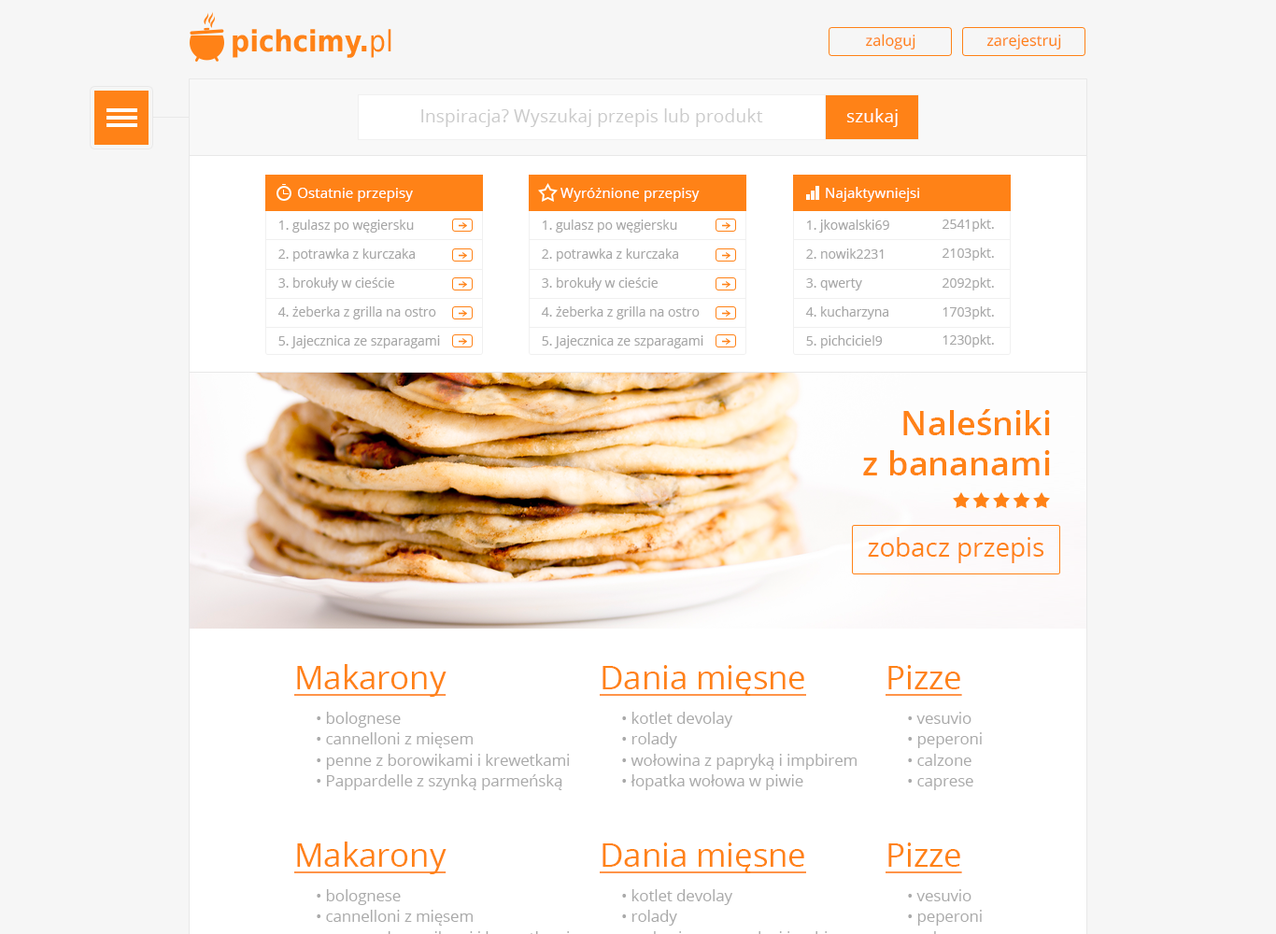
<style>
.page{position:relative;width:1276px;height:934px;background:#f6f6f6}
.page>*{position:absolute;margin:0}
.t1{font:29.2px "DejaVuSansCondensed-Bold";color:#ff8217}
.t2{font:29.2px "DejaVuSansCondensed";color:#ff8217}
.t3{font:15.1px "OpenSans";color:#ff8217}
.t4{font:18.2px "OpenSans";color:#cbcbcb}
.t5{font:18.2px "OpenSans";color:#ffffff}
.t6{font:14.3px "OpenSans";color:#ffffff}
.t7{font:13px "OpenSans";color:#a7a7a7}
.t8{font:33.7px "OpenSans-Semibold";color:#ff8217}
.t9{font:26px "OpenSans";color:#ff8217}
.t10{font:32.4px "OpenSans";color:#ff8217;text-decoration:underline}
.t11{font:15.6px/20.8px "OpenSans";color:#aaaaaa}
.t12{font:32.4px/20.8px "OpenSans";color:#ff8217}
</style>
<div class="page">
<p class="t1" style="left:233px;top:29px;width:158px;height:29px">pichcimy.<span class="t2">pl</span></p>
<p class="t3" style="left:866px;top:34px;width:50px;height:16px">zaloguj</p>
<p class="t3" style="left:987px;top:35px;width:74px;height:15px">zarejestruj</p>
<p class="t4" style="left:421px;top:108px;width:342px;height:19px">Inspiracja? Wyszukaj przepis lub produkt</p>
<p class="t5" style="left:846px;top:108px;width:52px;height:19px">szukaj</p>
<p class="t6" style="left:298px;top:188px;width:115px;height:14px">Ostatnie przepisy</p>
<p class="t6" style="left:561px;top:188px;width:139px;height:14px">Wyróżnione przepisy</p>
<p class="t6" style="left:826px;top:187px;width:93px;height:15px">Najaktywniejsi</p>
<p class="t7" style="left:279px;top:220px;width:135px;height:13px">1. gulasz po węgiersku</p>
<p class="t7" style="left:543px;top:220px;width:134px;height:13px">1. gulasz po węgiersku</p>
<p class="t7" style="left:807px;top:220px;width:82px;height:13px">1. jkowalski69</p>
<p class="t7" style="left:943px;top:219px;width:51px;height:13px">2541pkt.</p>
<p class="t7" style="left:278px;top:249px;width:137px;height:13px">2. potrawka z kurczaka</p>
<p class="t7" style="left:542px;top:249px;width:136px;height:13px">2. potrawka z kurczaka</p>
<p class="t7" style="left:806px;top:249px;width:78px;height:10px">2. nowik2231</p>
<p class="t7" style="left:943px;top:248px;width:51px;height:13px">2103pkt.</p>
<p class="t7" style="left:278px;top:277px;width:116px;height:14px">3. brokuły w cieście</p>
<p class="t7" style="left:542px;top:277px;width:116px;height:14px">3. brokuły w cieście</p>
<p class="t7" style="left:806px;top:278px;width:56px;height:13px">3. qwerty</p>
<p class="t7" style="left:943px;top:277px;width:51px;height:14px">2092pkt.</p>
<p class="t7" style="left:277px;top:306px;width:159px;height:14px">4. żeberka z grilla na ostro</p>
<p class="t7" style="left:541px;top:306px;width:159px;height:14px">4. żeberka z grilla na ostro</p>
<p class="t7" style="left:805px;top:306px;width:84px;height:14px">4. kucharzyna</p>
<p class="t7" style="left:943px;top:306px;width:51px;height:14px">1703pkt.</p>
<p class="t7" style="left:278px;top:335px;width:162px;height:13px">5. Jajecznica ze szparagami</p>
<p class="t7" style="left:542px;top:335px;width:162px;height:13px">5. Jajecznica ze szparagami</p>
<p class="t7" style="left:806px;top:335px;width:77px;height:13px">5. pichciciel9</p>
<p class="t7" style="left:943px;top:334px;width:51px;height:14px">1230pkt.</p>
<p class="t8" style="left:863px;top:409px;width:187px;height:67px;text-align:right">Naleśniki<br>z bananami</p>
<p class="t9" style="left:868px;top:537px;width:177px;height:26px">zobacz przepis</p>
<p class="t10" style="left:294px;top:664px;width:153px;height:33px">Makarony</p>
<p class="t10" style="left:600px;top:665px;width:206px;height:31px">Dania mięsne</p>
<p class="t10" style="left:886px;top:665px;width:76px;height:31px">Pizze</p>
<p class="t11" style="left:317px;top:712px;width:252px;height:78px"><span class="t12"><br></span>• bolognese<br>• cannelloni z mięsem<br>• penne z borowikami i krewetkami<br>• Pappardelle z szynką parmeńską</p>
<p class="t11" style="left:622px;top:712px;width:235px;height:78px"><span class="t12"><br></span>• kotlet devolay<br>• rolady<br>• wołowina z papryką i impbirem<br>• łopatka wołowa w piwie</p>
<p class="t11" style="left:908px;top:712px;width:74px;height:78px"><span class="t12"><br></span>• vesuvio<br>• peperoni<br>• calzone<br>• caprese</p>
<p class="t10" style="left:294px;top:842px;width:153px;height:33px">Makarony</p>
<p class="t10" style="left:600px;top:843px;width:206px;height:31px">Dania mięsne</p>
<p class="t10" style="left:886px;top:843px;width:76px;height:31px">Pizze</p>
</div>
